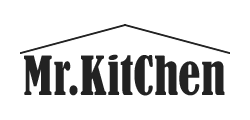
<style>
.page{position:relative;width:250px;height:120px;background:#ffffff}
.page>*{position:absolute;margin:0}
.t1{font:50.1px "BernardMT-Condensed";color:#222222}
</style>
<div class="page">
<p class="t1" style="left:24px;top:54px;width:201px;height:42px">Mr.KitChen</p>
</div>
